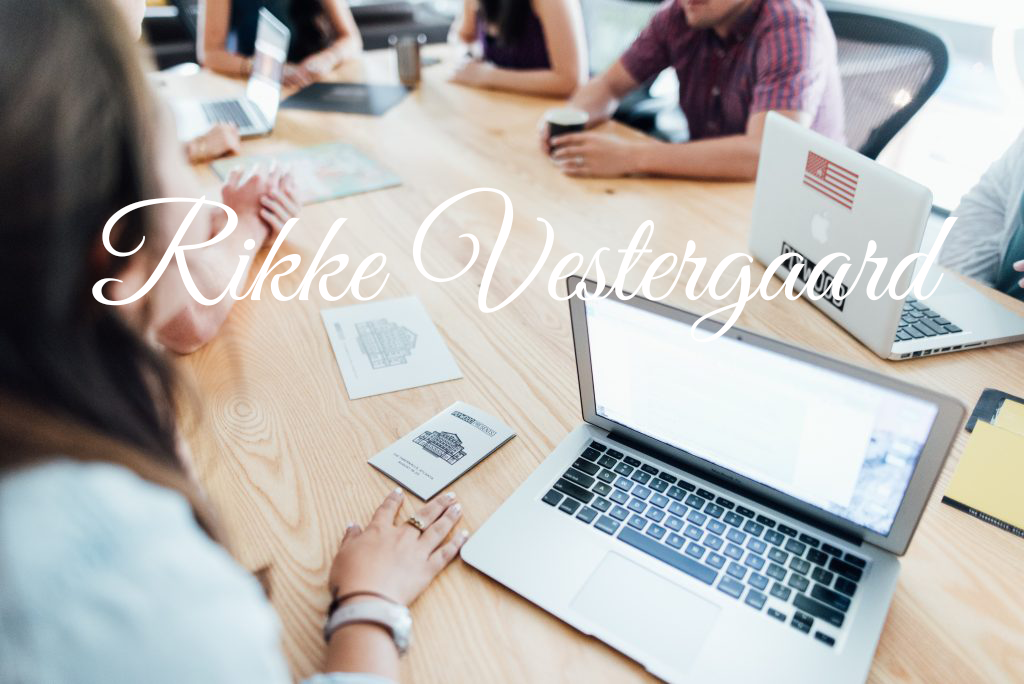
<style>
.page{position:relative;width:1024px;height:684px}
.page>*{position:absolute;margin:0}
.t1{font:133.3px "GreatVibes-Regular";color:#fffefe}
</style>
<div class="page">
<p class="t1" style="left:92px;top:187px;width:867px;height:156px">Rikke Vestergaard</p>
</div>
